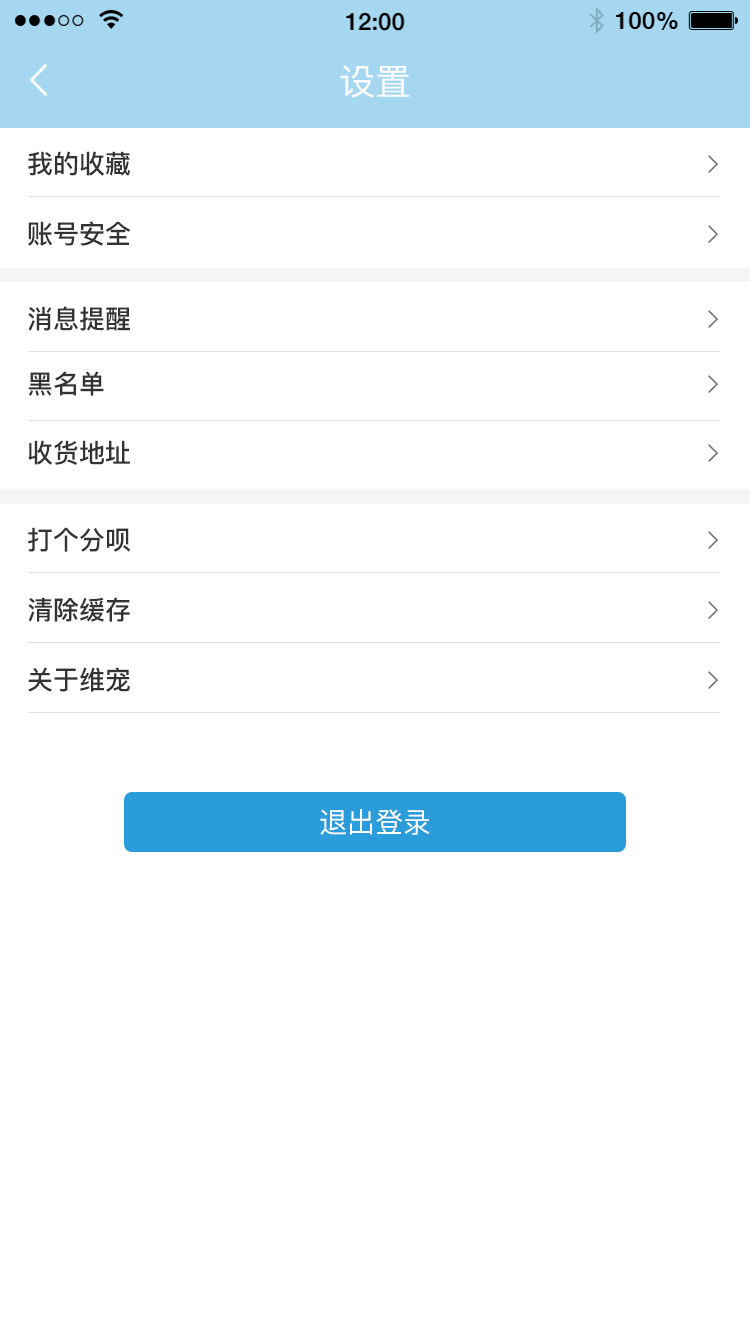
<style>
.page{position:relative;width:750px;height:1334px;background:#ffffff}
.page>*{position:absolute;margin:0}
.t1{font:36px "PingFangSC-Regular";color:#fefcfc}
.t2{font:26px "PingFangSC-Medium";color:#333333}
.t3{font:28px "PingFangSC-Regular";color:#ffffff}
</style>
<div class="page">
<p class="t1" style="left:340px;top:65px;width:70px;height:33px">设置</p>
<p class="t2" style="left:28px;top:151px;width:102px;height:25px">我的收藏</p>
<p class="t2" style="left:28px;top:221px;width:102px;height:25px">账号安全</p>
<p class="t2" style="left:28px;top:306px;width:102px;height:25px">消息提醒</p>
<p class="t2" style="left:28px;top:371px;width:76px;height:25px">黑名单</p>
<p class="t2" style="left:28px;top:440px;width:102px;height:25px">收货地址</p>
<p class="t2" style="left:27px;top:527px;width:104px;height:25px">打个分呗</p>
<p class="t2" style="left:28px;top:597px;width:102px;height:25px">清除缓存</p>
<p class="t2" style="left:28px;top:667px;width:102px;height:25px">关于维宠</p>
<p class="t3" style="left:320px;top:809px;width:109px;height:26px">退出登录</p>
</div>
